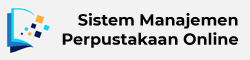
<style>
.page{position:relative;width:250px;height:60px;background:#f2f2f2}
.page>*{position:absolute;margin:0}
.t1{font:16px "Montserrat-Bold";color:#050505}
</style>
<div class="page">
<p class="t1" style="left:62px;top:13px;width:176px;height:35px;text-align:right">Sistem Manajemen<br> Perpustakaan Online</p>
</div>
